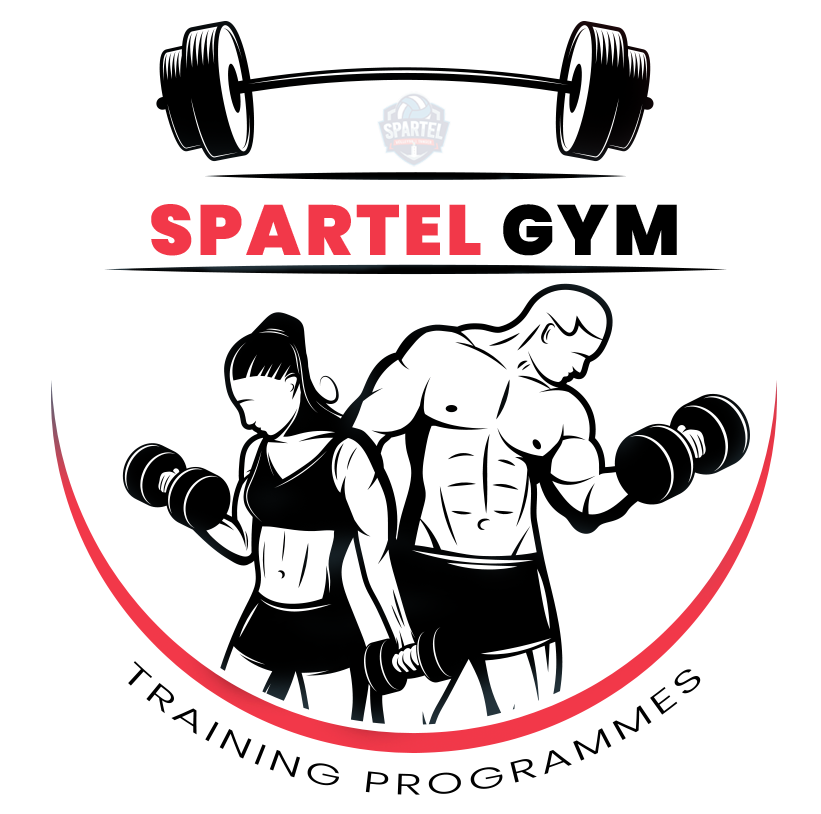
<style>
.page{position:relative;width:821px;height:814px;background:#ffffff}
.page>*{position:absolute;margin:0}
.t1{font:70.8px "Poppins-Black";letter-spacing:0.05em;color:#f23849;text-transform:uppercase}
.t2{font:70.8px "Poppins-Black";letter-spacing:0.05em;color:#000000;text-transform:uppercase}
.t3{font:29.2px "Poppins-Light";letter-spacing:0.11em;color:#000000;text-transform:uppercase;scale:1.43 1}
</style>
<div class="page">
<p class="t1" style="left:151px;top:204px;width:526px;height:52px">SPARTEL <span class="t2">GYM</span></p>
<p class="t3" style="left:128px;top:661px;width:573px;height:134px">training programmes</p>
</div>
